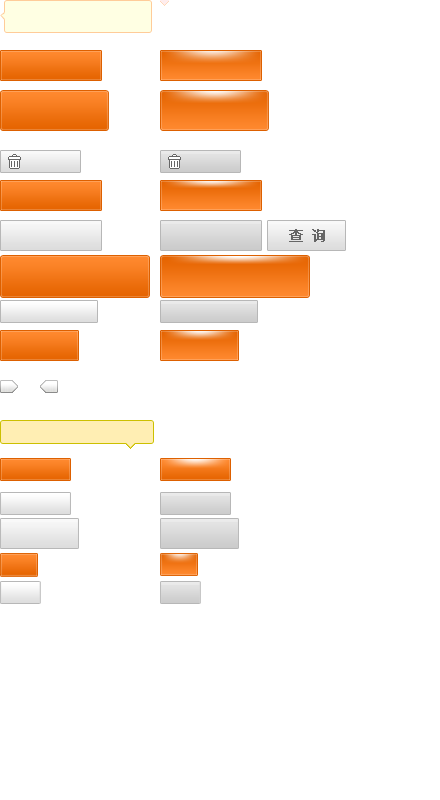
<style>
.page{position:relative;width:440px;height:800px;background:#ffffff}
.page>*{position:absolute;margin:0}
.t1{font:14px "SimSun";color:#666666;font-weight:bold}
</style>
<div class="page">
<p class="t1" style="left:289px;top:229px;width:36px;height:13px">查 询</p>
</div>
